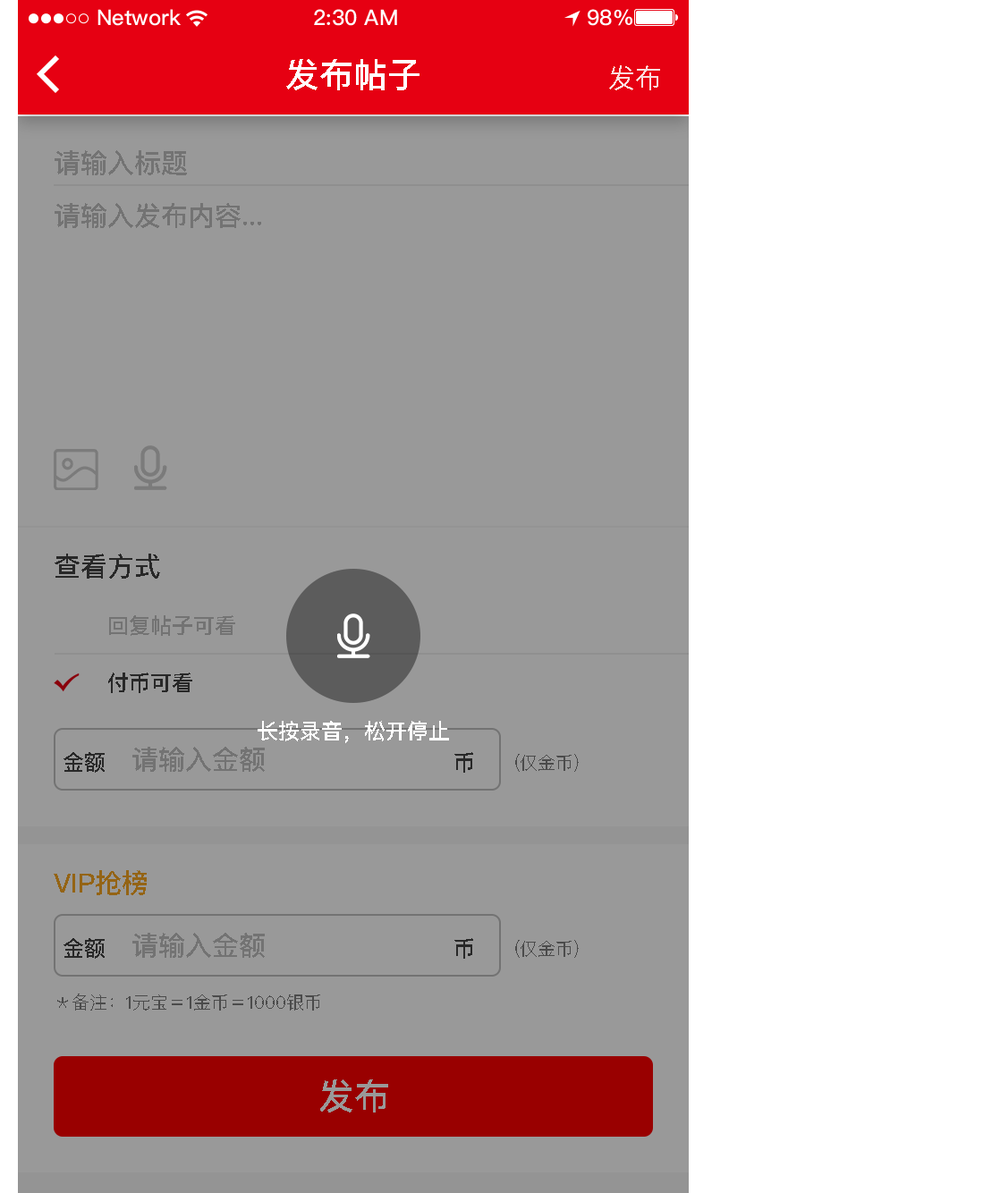
<style>
.page{position:relative;width:1000px;height:1193px;background:#999999}
.page>*{position:absolute;margin:0}
.t1{font:34px "PingFangSC-Medium";color:#ffffff;text-transform:uppercase}
.t2{font:26.8px "PingFangSC-Regular";color:#faddde;text-transform:uppercase}
.t3{font:26.8px "PingFangSC-Medium";color:#737373;text-transform:uppercase}
.t4{font:26.8px "PingFangSC-Medium";color:#282828;text-transform:uppercase}
.t5{font:21.5px "PingFangSC-Medium";color:#737373;text-transform:uppercase}
.t6{font:21.5px "PingFangSC-Medium";color:#282828;text-transform:uppercase}
.t7{font:21.5px "PingFangSC-Medium";color:#ffffff;text-transform:uppercase}
.t8{font:17.9px "PingFangSC-Regular";color:#4b4b4b;text-transform:uppercase}
.t9{font:26.8px "PingFangSC-Medium";color:#946415;text-transform:uppercase}
.t10{font:35.8px "PingFangSC-Medium";color:#999999;text-transform:uppercase}
</style>
<div class="page">
<p class="t1" style="left:286px;top:59px;width:133px;height:31px">发布帖子</p>
<p class="t2" style="left:609px;top:65px;width:51px;height:25px">发布</p>
<p class="t3" style="left:55px;top:150px;width:132px;height:25px">请输入标题</p>
<p class="t3" style="left:55px;top:203px;width:206px;height:25px">请输入发布内容...</p>
<p class="t4" style="left:55px;top:553px;width:105px;height:26px">查看方式</p>
<p class="t5" style="left:109px;top:615px;width:126px;height:21px">回复帖子可看</p>
<p class="t6" style="left:108px;top:672px;width:84px;height:21px">付币可看</p>
<p class="t7" style="left:258px;top:721px;width:191px;height:22px">长按录音，松开停止</p>
<p class="t3" style="left:132px;top:747px;width:133px;height:25px">请输入金额</p>
<p class="t6" style="left:63px;top:752px;width:42px;height:21px">金额</p>
<p class="t6" style="left:454px;top:752px;width:19px;height:21px">币</p>
<p class="t8" style="left:515px;top:754px;width:64px;height:18px">(仅金币)</p>
<p class="t9" style="left:54px;top:870px;width:93px;height:25px">vip抢榜</p>
<p class="t6" style="left:63px;top:938px;width:42px;height:21px">金额</p>
<p class="t3" style="left:132px;top:933px;width:133px;height:25px">请输入金额</p>
<p class="t6" style="left:454px;top:938px;width:19px;height:21px">币</p>
<p class="t8" style="left:515px;top:940px;width:64px;height:18px">(仅金币)</p>
<p class="t8" style="left:57px;top:993px;width:263px;height:17px">＊备注：1元宝＝1金币＝1000银币</p>
<p class="t10" style="left:320px;top:1079px;width:68px;height:33px">发布</p>
</div>
